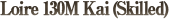
<style>
.page{position:relative;width:169px;height:19px;background:#ffffff}
.page>*{position:absolute;margin:0}
.t1{font:18px "RyuminPro-ExBold";letter-spacing:-0.08em;color:#4a3f32;font-weight:bold;scale:0.9 1}
</style>
<div class="page">
<p class="t1" style="left:0px;top:1px;width:169px;height:18px">Loire 130M Kai (Skilled)</p>
</div>
